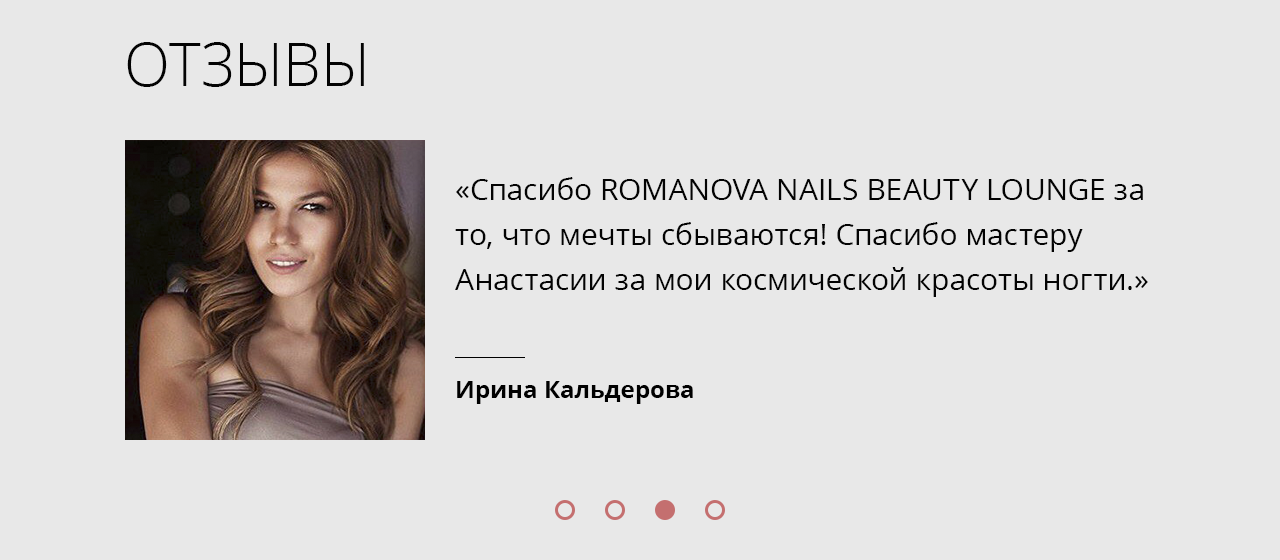
<style>
.page{position:relative;width:1280px;height:560px;background:#e8e8e8}
.page>*{position:absolute;margin:0}
.t1{font:60px "OpenSans-Light";color:#030303}
.t2{font:30px/45px "OpenSans";color:#030303}
.t3{font:24px "OpenSans-Bold";color:#000000}
</style>
<div class="page">
<p class="t1" style="left:127px;top:42px;width:237px;height:45px">ОТЗЫВЫ</p>
<p class="t2" style="left:455px;top:177px;width:693px;height:120px">«Спасибо ROMANOVA NAILS BEAUTY LOUNGE за то, что мечты сбываются! Спасибо мастеру Анастасии за мои космической красоты ногти.»</p>
<p class="t3" style="left:457px;top:381px;width:236px;height:23px">Ирина Кальдерова</p>
</div>
